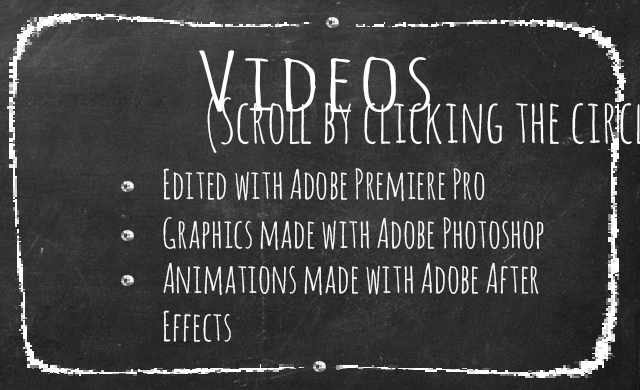
<style>
.page{position:relative;width:640px;height:390px}
.page>*{position:absolute;margin:0}
.t1{font:79.6px "AmaticSC-Regular";color:#ffffff;scale:1.77 1}
.t2{font:40px "AmaticSC-Regular";color:#ffffff}
</style>
<div class="page">
<p class="t1" style="left:199px;top:50px;width:231px;height:63px">Videos</p>
<p class="t2" style="left:163px;top:168px;width:322px;height:34px">Edited with Adobe Premiere Pro</p>
<p class="t2" style="left:163px;top:217px;width:381px;height:34px">Graphics made with Adobe Photoshop</p>
<p class="t2" style="left:163px;top:262px;width:376px;height:80px;text-align:right">Animations made with Adobe After<br>Effects</p>
</div>
